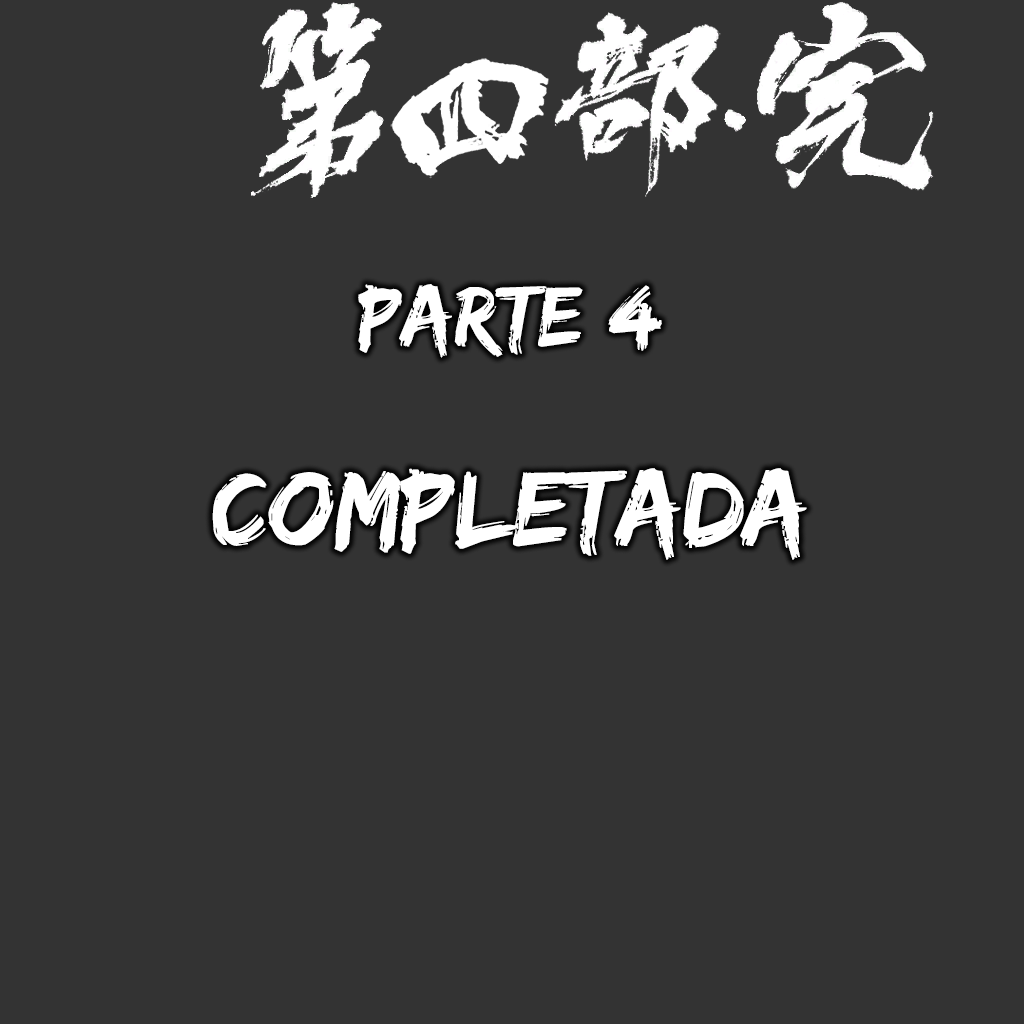
<style>
.page{position:relative;width:1024px;height:1024px;background:#333333}
.page>*{position:absolute;margin:0}
.t1{font:88.5px "EdoSZ";color:#ffffff}
.t2{font:109.9px "EdoSZ";color:#ffffff}
</style>
<div class="page">
<p class="t1" style="left:358px;top:284px;width:304px;height:74px">parte 4</p>
<p class="t2" style="left:212px;top:468px;width:595px;height:92px">COMPLETADA</p>
</div>
